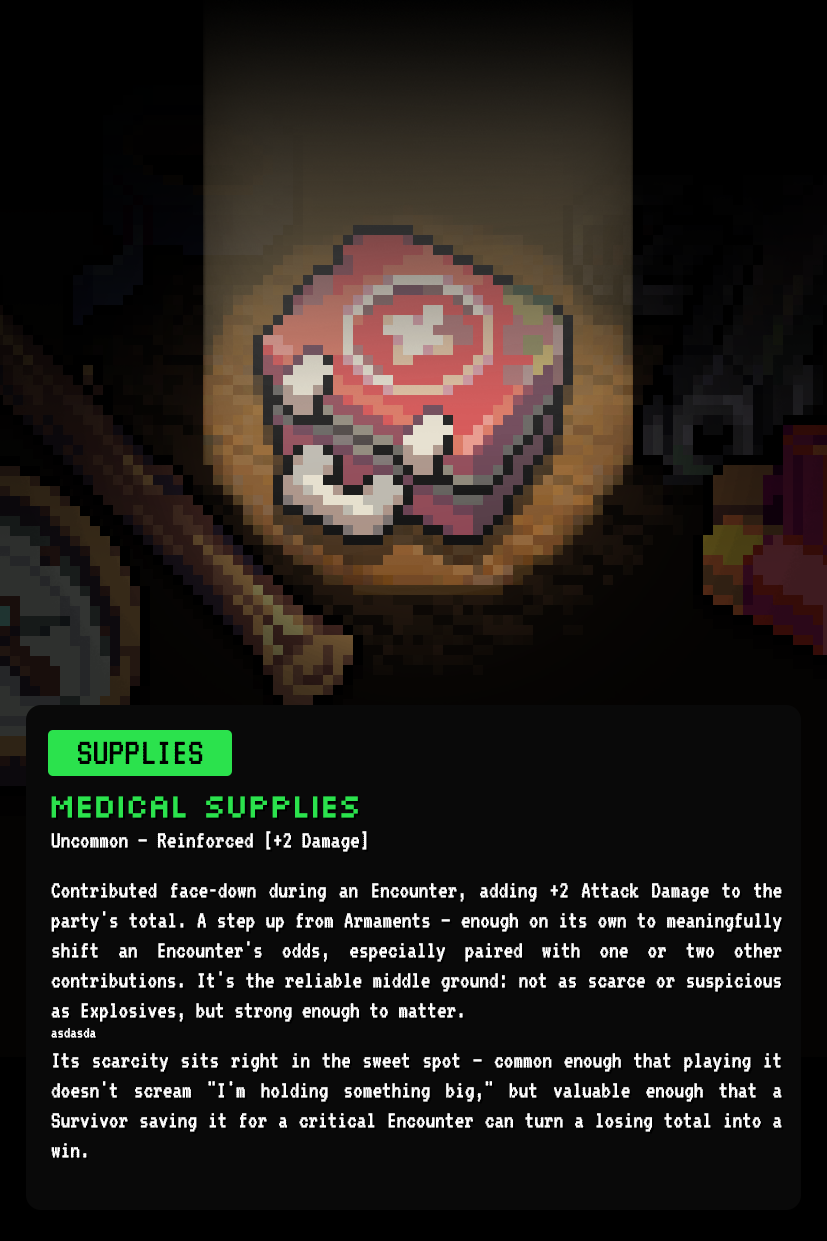
<style>
.page{position:relative;width:827px;height:1241px;background:#090909}
.page>*{position:absolute;margin:0}
.t1{font:39.7px "VT323-Regular";color:#000000}
.t2{font:25px "VT323-Regular";color:#ffffff;scale:0.96 1}
.t3{font:33.3px "Silkscreen-Regular";letter-spacing:-0.05em;color:#2be24d;scale:0.96 1}
.t4{font:16.7px "VT323-Regular";color:#ffffff;scale:0.96 1}
</style>
<div class="page">
<p class="t1" style="left:78px;top:741px;width:125px;height:23px">SUPPLIES</p>
<p class="t2" style="left:51px;top:796px;width:731px;height:362px;text-align:justify"><span class="t3">MEDICAL SUPPLIES<br></span>Uncommon — Reinforced [+2 Damage]<br><br>Contributed face-down during an Encounter, adding +2 Attack Damage to the party's total. A step up from Armaments — enough on its own to meaningfully shift an Encounter's odds, especially paired with one or two other contributions. It's the reliable middle ground: not as scarce or suspicious as Explosives, but strong enough to matter.<br><span class="t4">asdasda<br></span>Its scarcity sits right in the sweet spot — common enough that playing it doesn't scream "I'm holding something big," but valuable enough that a Survivor saving it for a critical Encounter can turn a losing total into a win.</p>
</div>
